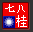
<style>
.page{position:relative;width:33px;height:32px;background:#f20000}
.page>*{position:absolute;margin:0}
.t1{font:10.4px "SimSun";color:#ffffff}
.t2{font:11.7px "SimSun";color:#ffffff}
</style>
<div class="page">
<p class="t1" style="left:5px;top:4px;width:20px;height:9px">七八</p>
<p class="t2" style="left:16px;top:15px;width:11px;height:12px">桂</p>
</div>
